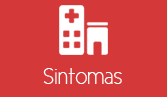
<style>
.page{position:relative;width:167px;height:97px;background:#d43838}
.page>*{position:absolute;margin:0}
.t1{font:22.7px "CicleFina";color:#ffffff}
</style>
<div class="page">
<p class="t1" style="left:43px;top:68px;width:79px;height:16px">Sintomas</p>
</div>
